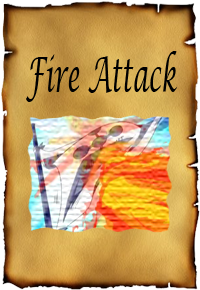
<style>
.page{position:relative;width:200px;height:290px}
.page>*{position:absolute;margin:0}
.t1{font:48px "LucidaCalligraphy-Italic";color:#000000;scale:0.5 1}
</style>
<div class="page">
<p class="t1" style="left:26px;top:51px;width:151px;height:51px">Fire Attack</p>
</div>
